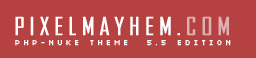
<style>
.page{position:relative;width:256px;height:58px;background:#b54141}
.page>*{position:absolute;margin:0}
.t1{font:23.9px "AgencyFB-Reg";letter-spacing:0.2em;color:#ffffff;font-weight:bold}
.t2{font:23.9px "AgencyFB-Reg";letter-spacing:0.2em;color:#e0b0b0;font-weight:bold}
.t3{font:8px "04b03";letter-spacing:0.46em;color:#ffffff;font-weight:bold}
</style>
<div class="page">
<p class="t1" style="left:15px;top:16px;width:214px;height:20px">PIXELMAYHEM.<span class="t2">COM</span></p>
<p class="t3" style="left:15px;top:40px;width:216px;height:6px">PHP-NUKE THEME  5.5 EDITION</p>
</div>
